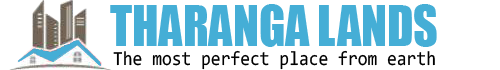
<style>
.page{position:relative;width:500px;height:70px;background:#ffffff}
.page>*{position:absolute;margin:0}
.t1{font:52.2px "Impact";color:#45aed6;scale:0.91 1}
.t2{font:20px "Consolas";color:#000000;scale:0.89 1}
</style>
<div class="page">
<p class="t1" style="left:110px;top:4px;width:327px;height:43px">THARANGA LANDS</p>
<p class="t2" style="left:113px;top:50px;width:322px;height:20px">The most perfect place from earth</p>
</div>
